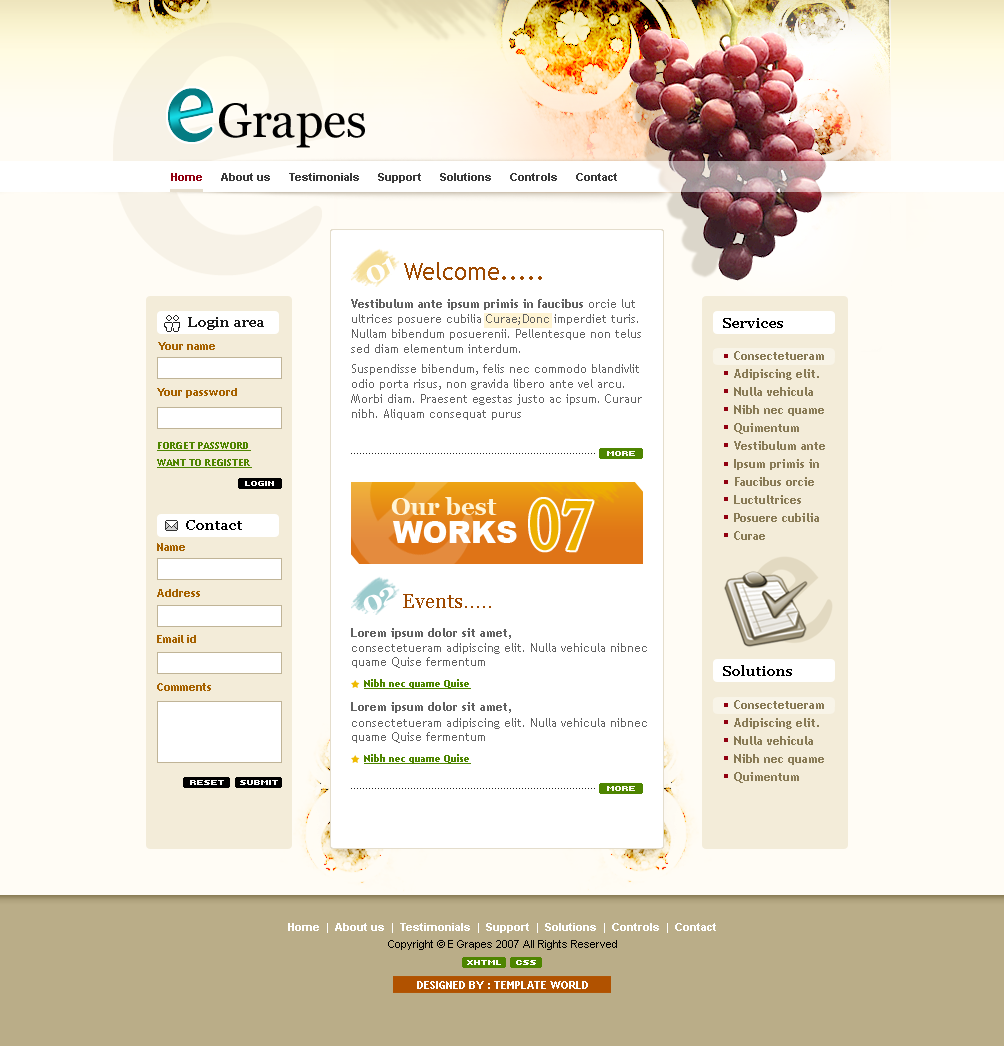
<style>
.page{position:relative;width:1004px;height:1046px;background:#fffcf5}
.page>*{position:absolute;margin:0}
.t1{font:106px "WeidemannITCbyBT-Bold";color:#057c83}
.t2{font:48px "Georgia";color:#000000}
.t3{font:11px "Arial-BoldMT";color:#3a3a3a}
.t4{font:11px "Arial-BoldMT";color:#910010}
.t5{font:30px "Georgia-Bold";letter-spacing:-0.1em;color:#ffffff}
.t6{font:24px "TrebuchetMS";color:#9e4900}
.t7{font:12px/15px "TrebuchetMS";color:#616161}
.t8{font:12px/15px "TrebuchetMS-Bold";color:#616161}
.t9{font:14px "Georgia-Bold";color:#1a1a1a}
.t10{font:14px "Georgia-Bold";color:#000000}
.t11{font:11px "TrebuchetMS-Bold";color:#a56100}
.t12{font:12px/18px "TrebuchetMS-Bold";color:#897b56}
.t13{font:10px "TrebuchetMS-Bold";color:#4e8500;text-transform:uppercase;text-decoration:underline}
.t14{font:8px "Kroeger0563";color:#fffcf5;text-transform:uppercase}
.t15{font:8px "Kroeger0563";color:#ffffff;text-transform:uppercase}
.t16{font:12px "Arial-BoldMT";color:#ffffff}
.t17{font:24px "Georgia-Bold";color:#fff4d3}
.t18{font:71.8px "WeidemannITCbyBT-Bold";color:#edb000;scale:0.85 1}
.t19{font:24px "ArialMT";color:#000000}
.t20{font:30px "Arial-Black";color:#ffffff;text-transform:uppercase}
.t21{font:20px "Georgia";color:#9e4900}
.t22{font:22px "Georgia";color:#9e4900}
.t23{font:12px "TrebuchetMS-Bold";color:#616161}
.t24{font:12px/14px "TrebuchetMS";color:#616161}
.t25{font:10px "TrebuchetMS-Bold";color:#4e8500;text-decoration:underline}
.t26{font:11px "Arial-BoldMT";color:#ffffff}
.t27{font:11px "ArialMT";color:#000000}
.t28{font:11px "TrebuchetMS-Bold";color:#ffffff;text-transform:uppercase}
</style>
<div class="page">
<p class="t1" style="left:168px;top:88px;width:46px;height:55px">e</p>
<p class="t2" style="left:219px;top:103px;width:146px;height:45px">Grapes</p>
<p class="t3" style="left:171px;top:173px;width:446px;height:10px"><span class="t4">Home</span>      About us      Testimonials      Support      Solutions      Controls      Contact</p>
<p class="t5" style="left:366px;top:258px;width:33px;height:24px;rotate:-25deg">01</p>
<p class="t6" style="left:404px;top:262px;width:138px;height:18px">Welcome.....</p>
<p class="t7" style="left:351px;top:299px;width:291px;height:121px"><span class="t8">Vestibulum ante ipsum primis in faucibus</span> orcie lut ultrices posuere cubilia Curae;Donc imperdiet turis. Nullam bibendum posuerenii. Pellentesque non telus sed diam elementum interdum.<br><br>Suspendisse bibendum, felis nec commodo blandivlit odio porta risus, non gravida libero ante vel arcu. Morbi diam. Praesent egestas justo ac ipsum. Curaur nibh. Aliquam consequat purus</p>
<p class="t9" style="left:188px;top:317px;width:76px;height:13px">Login area</p>
<p class="t10" style="left:723px;top:318px;width:60px;height:10px">Services</p>
<p class="t11" style="left:158px;top:342px;width:57px;height:8px">Your name</p>
<p class="t12" style="left:734px;top:351px;width:91px;height:189px">Consectetueram Adipiscing elit. Nulla vehicula Nibh nec quame Quimentum Vestibulum ante Ipsum primis in Faucibus orcie Luctultrices Posuere cubilia Curae</p>
<p class="t11" style="left:157px;top:388px;width:80px;height:10px">Your password</p>
<p class="t13" style="left:157px;top:442px;width:94px;height:9px">forget password</p>
<p class="t13" style="left:157px;top:459px;width:95px;height:9px">Want to register</p>
<p class="t14" style="left:607px;top:451px;width:28px;height:5px">more</p>
<p class="t15" style="left:245px;top:481px;width:29px;height:5px"><span class="t16"> </span>login</p>
<p class="t17" style="left:391px;top:497px;width:106px;height:18px">Our best</p>
<p class="t18" style="left:530px;top:499px;width:63px;height:52px;rotate:1deg">07</p>
<p class="t10" style="left:186px;top:520px;width:56px;height:10px"><span class="t19"><br></span>Contact</p>
<p class="t20" style="left:393px;top:521px;width:124px;height:22px">works</p>
<p class="t11" style="left:157px;top:543px;width:28px;height:8px">Name</p>
<p class="t11" style="left:157px;top:589px;width:43px;height:8px">Address</p>
<p class="t5" style="left:363px;top:587px;width:36px;height:25px;rotate:-25deg">02</p>
<p class="t21" style="left:403px;top:594px;width:88px;height:14px">Events<span class="t22">.....</span></p>
<p class="t23" style="left:351px;top:628px;width:160px;height:11px">Lorem ipsum dolor sit amet,</p>
<p class="t11" style="left:157px;top:635px;width:39px;height:8px">Email id</p>
<p class="t24" style="left:352px;top:643px;width:295px;height:25px">consectetueram adipiscing elit. Nulla vehicula nibnec quame Quise fermentum</p>
<p class="t10" style="left:723px;top:665px;width:69px;height:11px">Solutions</p>
<p class="t11" style="left:157px;top:683px;width:54px;height:8px">Comments</p>
<p class="t25" style="left:364px;top:679px;width:107px;height:10px">Nibh nec quame Quise</p>
<p class="t23" style="left:351px;top:702px;width:160px;height:11px">Lorem ipsum dolor sit amet,</p>
<p class="t12" style="left:734px;top:700px;width:90px;height:83px">Consectetueram Adipiscing elit. Nulla vehicula Nibh nec quame Quimentum</p>
<p class="t24" style="left:352px;top:718px;width:295px;height:25px">consectetueram adipiscing elit. Nulla vehicula nibnec quame Quise fermentum</p>
<p class="t25" style="left:364px;top:754px;width:107px;height:10px">Nibh nec quame Quise</p>
<p class="t15" style="left:190px;top:780px;width:34px;height:5px"><span class="t16"> </span>reset</p>
<p class="t15" style="left:240px;top:780px;width:38px;height:5px"><span class="t16"> </span>SUBMIT</p>
<p class="t14" style="left:607px;top:786px;width:28px;height:5px">more</p>
<p class="t26" style="left:288px;top:923px;width:428px;height:10px">Home  |  About us  |  Testimonials  |  Support  |  Solutions  |  Controls  |  Contact</p>
<p class="t27" style="left:388px;top:940px;width:229px;height:10px">Copyright © E Grapes 2007 All Rights Reserved</p>
<p class="t15" style="left:467px;top:960px;width:34px;height:5px"><span class="t16"> </span>xhtml</p>
<p class="t15" style="left:516px;top:960px;width:20px;height:5px"><span class="t16"> </span>css</p>
<p class="t28" style="left:417px;top:981px;width:171px;height:8px">Designed By : template world</p>
</div>
